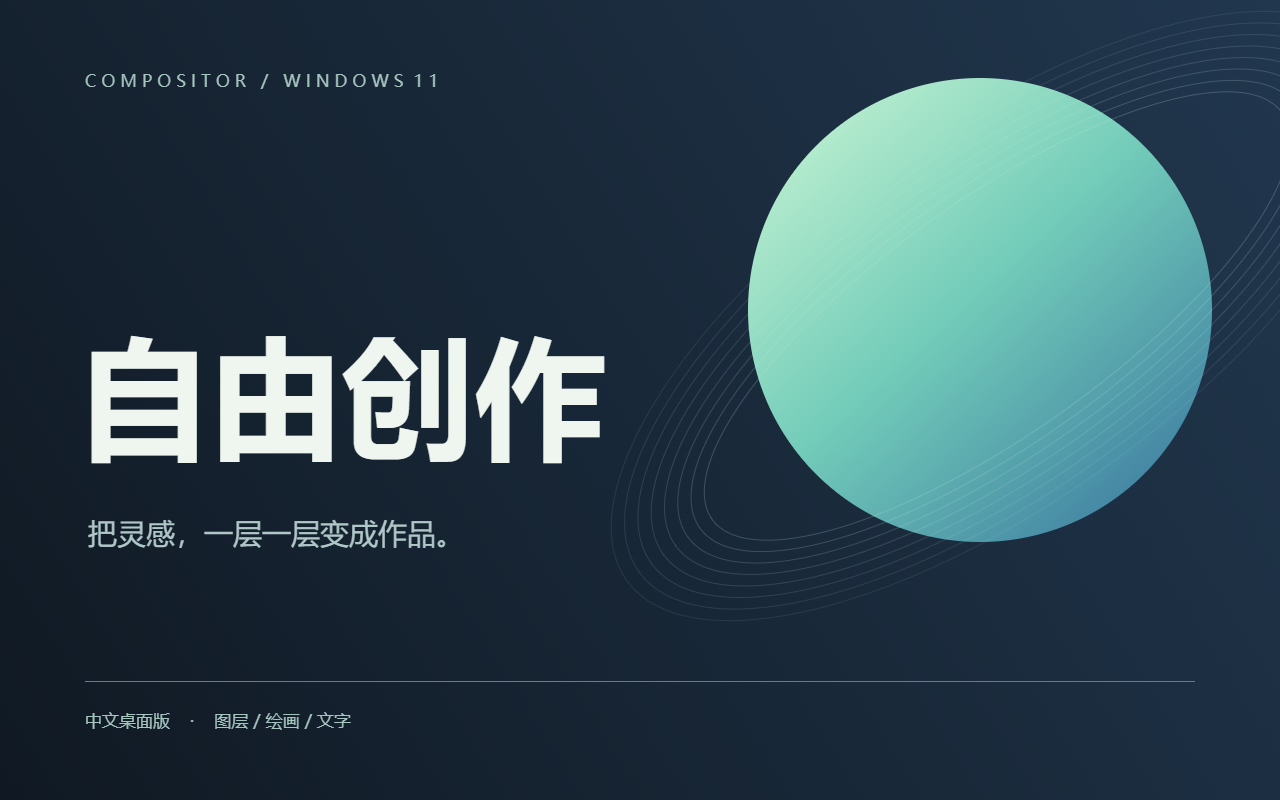
<style>
.page{position:relative;width:1280px;height:800px}
.page>*{position:absolute;margin:0}
.t1{font:17px "MicrosoftYaHei";color:#a6c5bf}
.t2{font:132px "MicrosoftYaHei";color:#eef6ef;font-weight:bold}
.t3{font:29px "MicrosoftYaHei";color:#b0c7c8}
</style>
<div class="page">
<p class="t1" style="left:84px;top:72px;width:356px;height:26px">C O M P O S I T O R   /   W I N D O W S  1 1</p>
<p class="t2" style="left:77px;top:333px;width:530px;height:192px">自由创作</p>
<p class="t3" style="left:87px;top:518px;width:379px;height:45px">把灵感，一层一层变成作品。</p>
<p class="t1" style="left:84px;top:710px;width:268px;height:28px">中文桌面版    ·    图层 / 绘画 / 文字</p>
</div>
